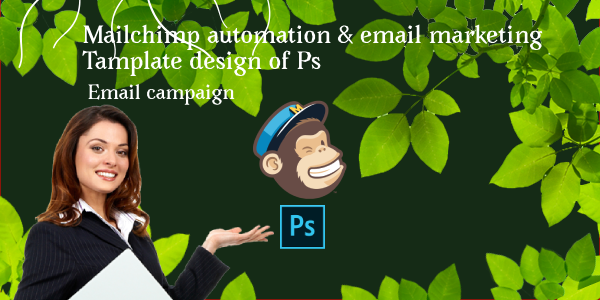
<style>
.page{position:relative;width:600px;height:300px;background:#152b16}
.page>*{position:absolute;margin:0}
.t1{font:22px "Avara-Bold";color:#ffffff}
.t2{font:18px "Avara-Bold";color:#ffffff}
</style>
<div class="page">
<p class="t1" style="left:82px;top:24px;width:461px;height:53px">Mailchimp automation &amp; email marketing<br>Tamplate design of Ps</p>
<p class="t2" style="left:88px;top:83px;width:147px;height:22px">Email campaign</p>
</div>
